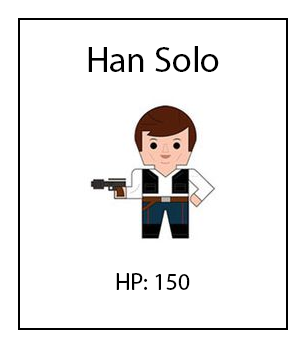
<style>
.page{position:relative;width:306px;height:350px;background:#ffffff}
.page>*{position:absolute;margin:0}
.t1{font:36px "MyriadPro-Regular";color:#000000}
.t2{font:24px "MyriadPro-Regular";color:#000000}
</style>
<div class="page">
<p class="t1" style="left:88px;top:46px;width:131px;height:26px">Han Solo</p>
<p class="t2" style="left:116px;top:273px;width:74px;height:17px">HP: 150</p>
</div>
